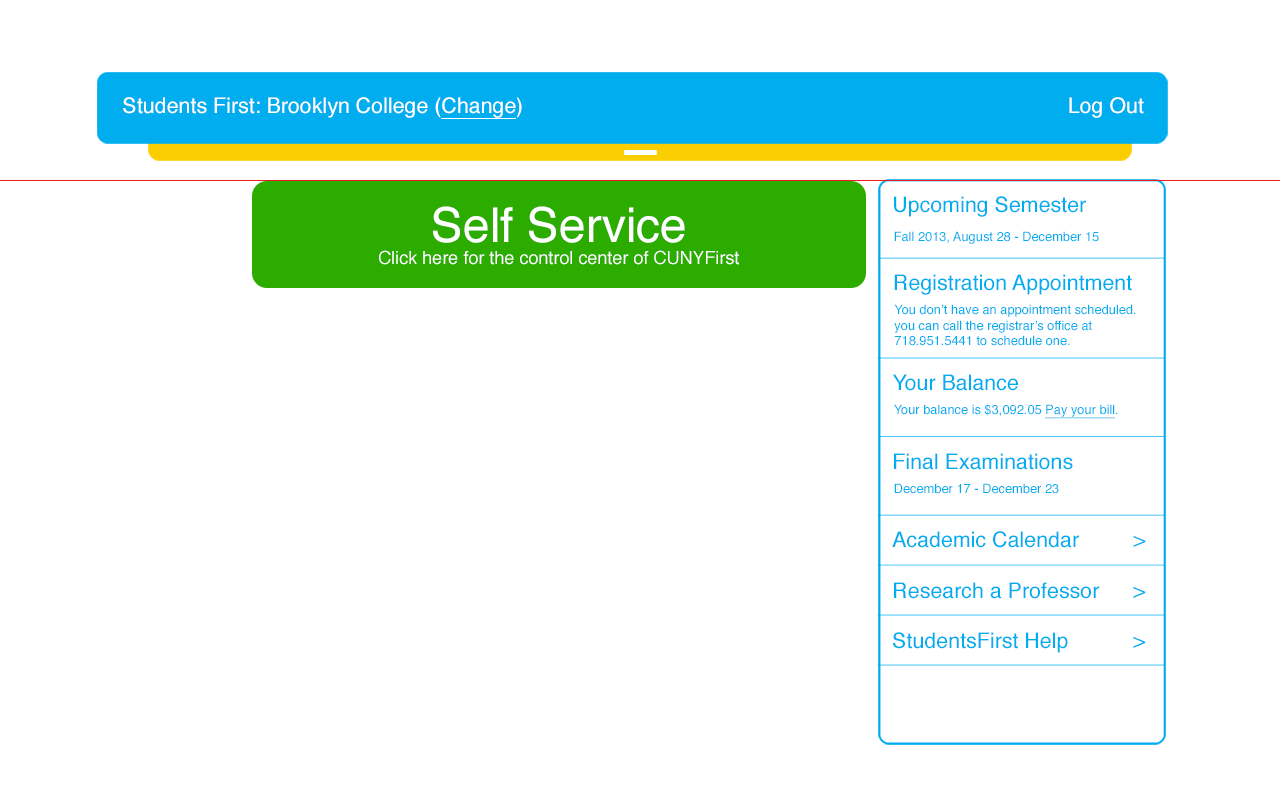
<style>
.page{position:relative;width:1280px;height:800px;background:#ffffff}
.page>*{position:absolute;margin:0}
.t1{font:21.4px "Helvetica";color:#ffffff}
.t2{font:21.4px "Helvetica";color:#ffffff;text-decoration:underline}
.t3{font:21.4px "Helvetica";color:#00aeef}
.t4{font:48px "Helvetica";color:#ffffff}
.t5{font:12.9px "Helvetica";color:#00aeef}
.t6{font:18px "Helvetica";color:#ffffff}
.t7{font:12.9px "Helvetica";color:#00aeef;text-decoration:underline}
</style>
<div class="page">
<p class="t1" style="left:123px;top:97px;width:399px;height:22px">Students First: Brooklyn College (<span class="t2">Change</span>)</p>
<p class="t1" style="left:1069px;top:97px;width:75px;height:21px">Log Out</p>
<p class="t3" style="left:894px;top:196px;width:192px;height:21px">Upcoming Semester</p>
<p class="t4" style="left:433px;top:206px;width:252px;height:37px">Self Service</p>
<p class="t5" style="left:894px;top:231px;width:205px;height:13px">Fall 2013, August 28 - December 15</p>
<p class="t6" style="left:379px;top:250px;width:360px;height:15px">Click here for the control center of CUNYFirst</p>
<p class="t3" style="left:894px;top:274px;width:238px;height:21px">Registration Appointment</p>
<p class="t5" style="left:894px;top:304px;width:242px;height:42px">You don’t have an appointment scheduled.<br>you can call the registrar’s office at<br>718.951.5441 to schedule one.</p>
<p class="t3" style="left:892px;top:374px;width:126px;height:17px">Your Balance</p>
<p class="t5" style="left:894px;top:404px;width:224px;height:15px">Your balance is $3,092.05 <span class="t7">Pay your bill</span>.</p>
<p class="t3" style="left:894px;top:453px;width:179px;height:17px">Final Examinations</p>
<p class="t5" style="left:894px;top:483px;width:165px;height:11px">December 17 - December 23</p>
<p class="t3" style="left:892px;top:531px;width:187px;height:17px">Academic Calendar</p>
<p class="t3" style="left:1133px;top:535px;width:13px;height:12px">&gt;</p>
<p class="t3" style="left:894px;top:582px;width:206px;height:17px">Research a Professor</p>
<p class="t3" style="left:1133px;top:586px;width:13px;height:12px">&gt;</p>
<p class="t3" style="left:893px;top:632px;width:175px;height:21px">StudentsFirst Help</p>
<p class="t3" style="left:1133px;top:636px;width:13px;height:12px">&gt;</p>
</div>
